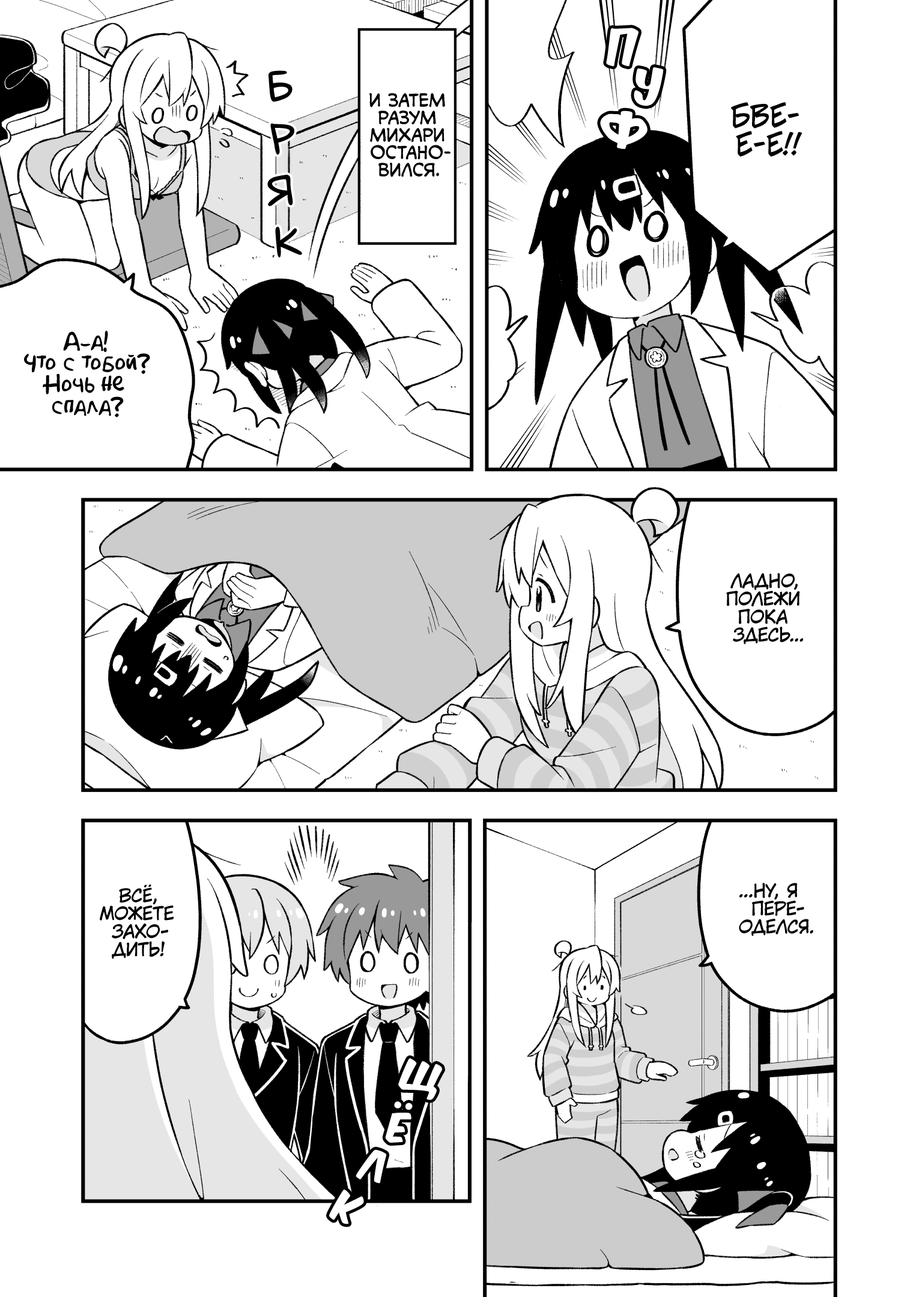
<style>
.page{position:relative;width:919px;height:1297px;background:#ffffff}
.page>*{position:absolute;margin:0}
.t1{font:43.2px "KomikaTitle-AxisRUS-LAT";color:#ffffff}
.t2{font:43.2px "laCartoonerie";color:#000000;text-transform:uppercase}
.t3{font:17.4px "v_CCMonologous";color:#000000;text-transform:uppercase}
.t4{font:28.8px "v_CCJeffCampbell";color:#000000;text-transform:uppercase}
.t5{font:21.6px "AkbarPlain";color:#000000}
.t6{font:18px "KuraiVoice2";color:#000000;text-transform:uppercase}
.t7{font:36px "KomikaTitle-AxisRUS-LAT";color:#ffffff}
</style>
<div class="page">
<p class="t1" style="left:606px;top:28px;width:33px;height:39px">п</p>
<p class="t2" style="left:269px;top:70px;width:24px;height:32px;rotate:-2deg">б</p>
<p class="t1" style="left:634px;top:67px;width:30px;height:39px">у</p>
<p class="t3" style="left:369px;top:93px;width:82px;height:84px;text-align:center">И затем<br>разум<br>Михари<br>остано-<br>вился.</p>
<p class="t1" style="left:600px;top:111px;width:48px;height:39px">ф</p>
<p class="t4" style="left:731px;top:102px;width:72px;height:55px;text-align:center">Бве-<br>е-е!!</p>
<p class="t2" style="left:270px;top:123px;width:24px;height:32px;rotate:-2deg">р</p>
<p class="t2" style="left:267px;top:175px;width:26px;height:32px;rotate:-3deg">я</p>
<p class="t2" style="left:275px;top:226px;width:27px;height:32px;rotate:-4deg">к</p>
<p class="t5" style="left:24px;top:330px;width:126px;height:87px;text-align:center">А-а!<br>Что с тобой?<br>Ночь не<br>спала?</p>
<p class="t6" style="left:726px;top:573px;width:77px;height:72px;text-align:center">Ладно,<br>полежи<br>пока<br>здесь...</p>
<p class="t6" style="left:100px;top:885px;width:74px;height:74px;text-align:center">Всё,<br>можете<br>захо-<br>дить!</p>
<p class="t6" style="left:739px;top:883px;width:74px;height:53px;text-align:center">...Ну, я<br>пере-<br>оделся.</p>
<p class="t7" style="left:398px;top:1058px;width:45px;height:42px;rotate:12deg">щ</p>
<p class="t7" style="left:385px;top:1102px;width:28px;height:41px;rotate:8deg">ё</p>
<p class="t7" style="left:356px;top:1150px;width:31px;height:34px;rotate:11deg">л</p>
<p class="t7" style="left:329px;top:1190px;width:35px;height:35px;rotate:22deg">к</p>
</div>
